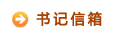
<style>
.page{position:relative;width:125px;height:40px;background:#ffffff}
.page>*{position:absolute;margin:0}
.t1{font:14px "MicrosoftYaHei";letter-spacing:0.2em;color:#a84200;font-weight:bold}
</style>
<div class="page">
<p class="t1" style="left:36px;top:11px;width:66px;height:15px">书记信箱</p>
</div>
